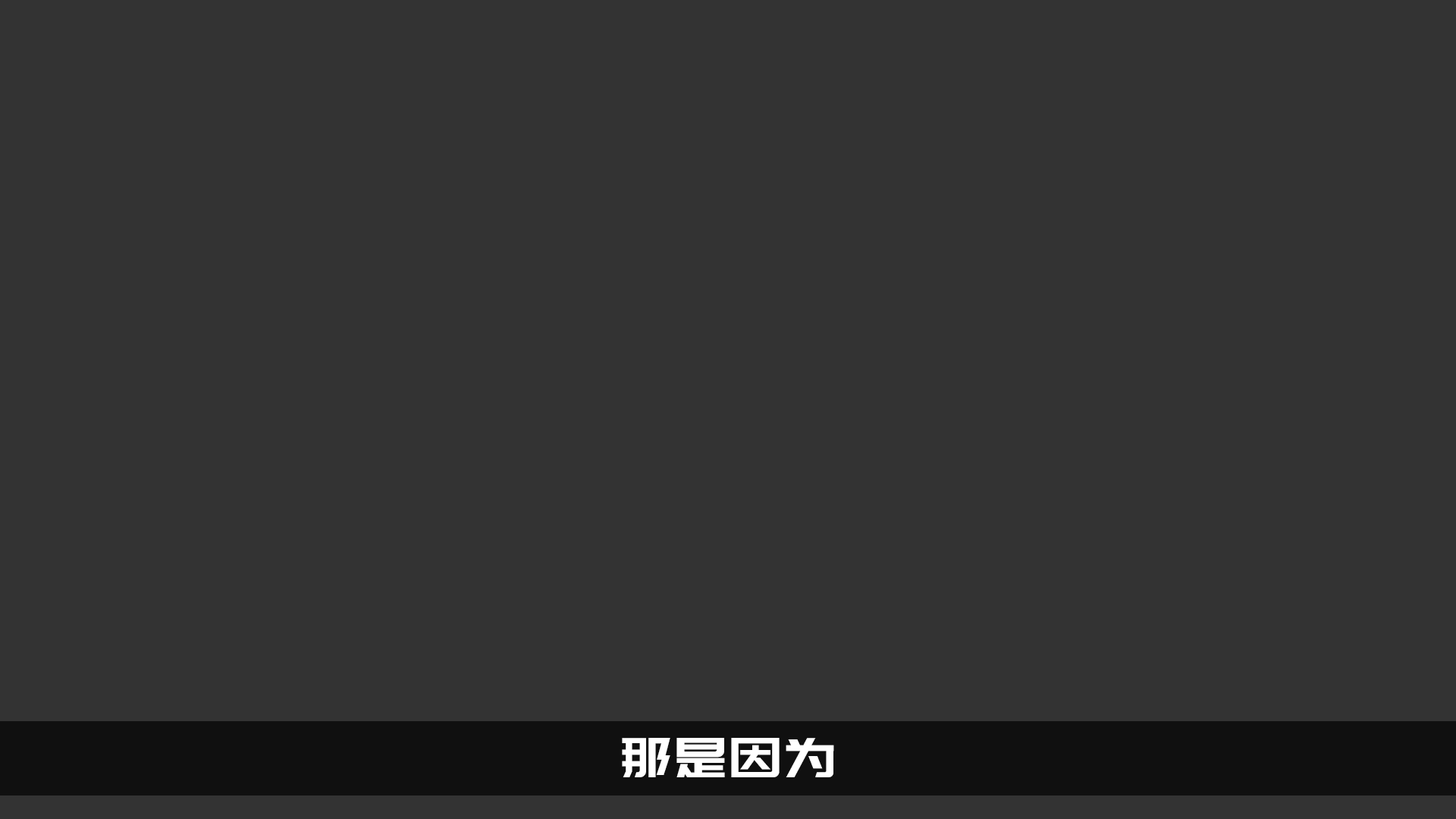
<style>
.page{position:relative;width:1456px;height:819px;background:#333333}
.page>*{position:absolute;margin:0}
.t1{font:54.6px "PangMenZhengDao-3";color:#ffffff}
</style>
<div class="page">
<p class="t1" style="left:622px;top:738px;width:212px;height:39px">那是因为</p>
</div>
